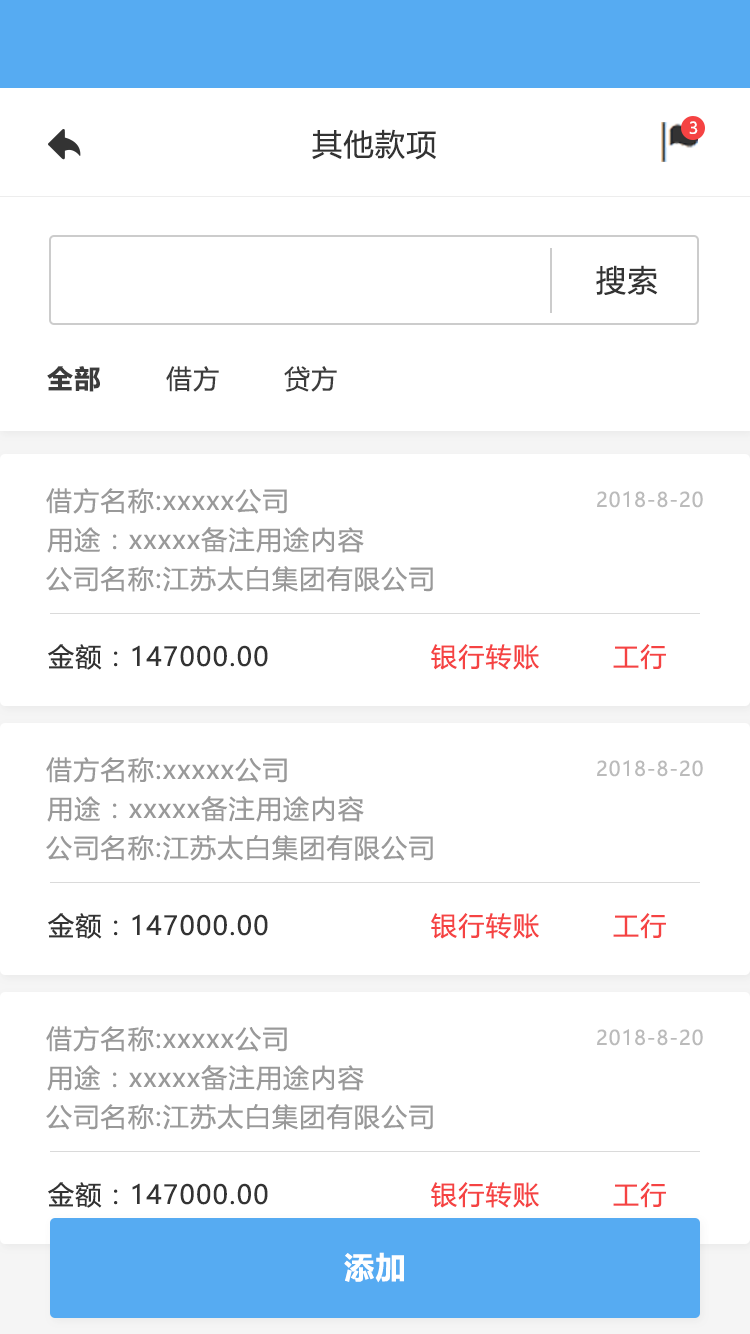
<style>
.page{position:relative;width:750px;height:1334px;background:#ffffff}
.page>*{position:absolute;margin:0}
.t1{font:16px "MicrosoftYaHeiUI";color:#ffffff}
.t2{font:30px "MicrosoftYaHeiUI";letter-spacing:0.05em;color:#333333}
.t3{font:26px "MicrosoftYaHeiUI-Bold";letter-spacing:0.05em;color:#3c3c3c}
.t4{font:26px "MicrosoftYaHeiUI";letter-spacing:0.05em;color:#3c3c3c}
.t5{font:26px "MicrosoftYaHeiUI";letter-spacing:0.05em;color:#999999}
.t6{font:20px "MicrosoftYaHeiUI";letter-spacing:0.05em;color:#bbbbbb}
.t7{font:26px "MicrosoftYaHeiUI";letter-spacing:0.05em;color:#333333}
.t8{font:26px "MicrosoftYaHeiUI";letter-spacing:0.05em;color:#f54343}
.t9{font:30px "MicrosoftYaHeiUI-Bold";letter-spacing:0.05em;color:#ffffff}
</style>
<div class="page">
<p class="t1" style="left:689px;top:121px;width:9px;height:13px">3</p>
<p class="t2" style="left:312px;top:129px;width:124px;height:31px">其他款项</p>
<p class="t2" style="left:596px;top:265px;width:62px;height:30px">搜索</p>
<p class="t3" style="left:47px;top:366px;width:53px;height:26px">全部</p>
<p class="t4" style="left:166px;top:366px;width:53px;height:26px">借方</p>
<p class="t4" style="left:284px;top:366px;width:53px;height:26px">贷方</p>
<p class="t5" style="left:46px;top:488px;width:241px;height:26px">借方名称:xxxxx公司</p>
<p class="t6" style="left:597px;top:491px;width:106px;height:17px">2018-8-20</p>
<p class="t5" style="left:47px;top:526px;width:317px;height:27px">用途：xxxxx备注用途内容</p>
<p class="t5" style="left:46px;top:566px;width:387px;height:26px">公司名称:江苏太白集团有限公司</p>
<p class="t7" style="left:48px;top:644px;width:220px;height:26px">金额：147000.00</p>
<p class="t8" style="left:431px;top:644px;width:108px;height:26px">银行转账</p>
<p class="t8" style="left:613px;top:644px;width:53px;height:26px">工行</p>
<p class="t5" style="left:46px;top:757px;width:241px;height:26px">借方名称:xxxxx公司</p>
<p class="t6" style="left:597px;top:760px;width:106px;height:17px">2018-8-20</p>
<p class="t5" style="left:47px;top:795px;width:317px;height:27px">用途：xxxxx备注用途内容</p>
<p class="t5" style="left:46px;top:835px;width:387px;height:26px">公司名称:江苏太白集团有限公司</p>
<p class="t7" style="left:48px;top:913px;width:220px;height:26px">金额：147000.00</p>
<p class="t8" style="left:431px;top:913px;width:108px;height:26px">银行转账</p>
<p class="t8" style="left:613px;top:913px;width:53px;height:26px">工行</p>
<p class="t5" style="left:46px;top:1026px;width:241px;height:26px">借方名称:xxxxx公司</p>
<p class="t6" style="left:597px;top:1029px;width:106px;height:17px">2018-8-20</p>
<p class="t5" style="left:47px;top:1064px;width:317px;height:27px">用途：xxxxx备注用途内容</p>
<p class="t5" style="left:46px;top:1104px;width:387px;height:26px">公司名称:江苏太白集团有限公司</p>
<p class="t7" style="left:48px;top:1182px;width:220px;height:26px">金额：147000.00</p>
<p class="t8" style="left:431px;top:1182px;width:108px;height:26px">银行转账</p>
<p class="t8" style="left:613px;top:1182px;width:53px;height:26px">工行</p>
<p class="t9" style="left:344px;top:1252px;width:60px;height:31px">添加</p>
</div>
